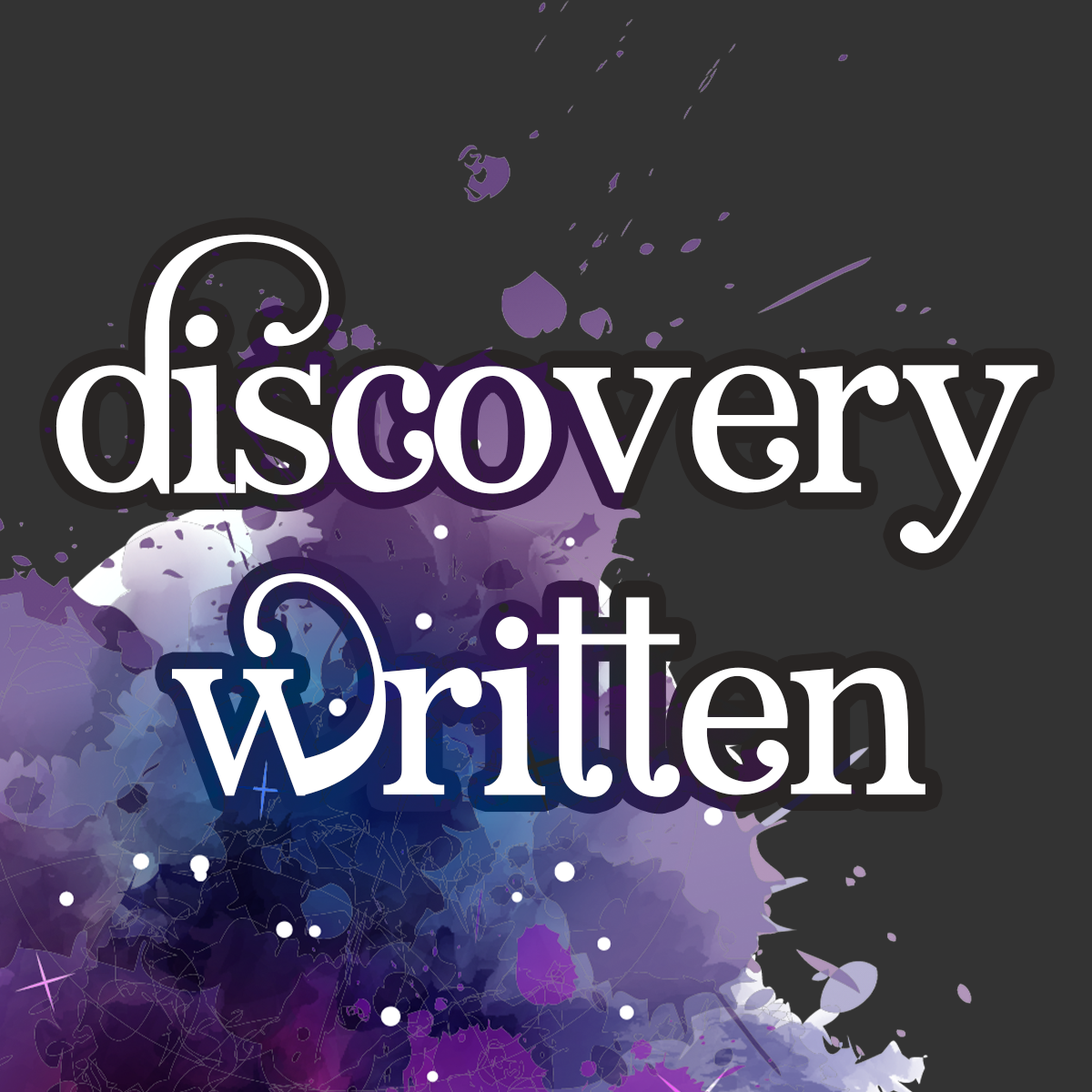
<style>
.page{position:relative;width:1092px;height:1092px;background:#333333}
.page>*{position:absolute;margin:0}
.t1{font:251.2px "AngelicSerif";letter-spacing:-0.02em;color:#ffffff}
</style>
<div class="page">
<p class="t1" style="left:56px;top:234px;width:982px;height:563px;text-align:center">Discovery<br>Written</p>
</div>
